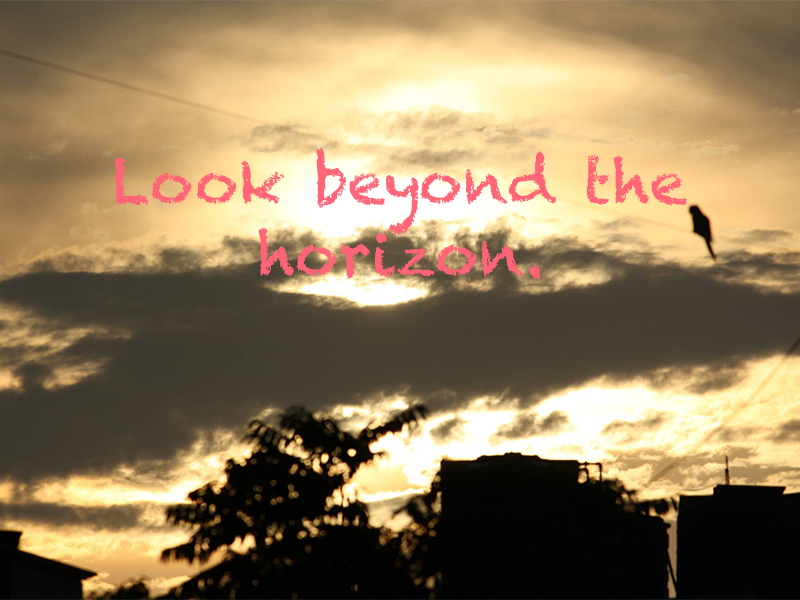
<style>
.page{position:relative;width:800px;height:600px}
.page>*{position:absolute;margin:0}
.t1{font:60px "Chalkduster";color:#ff6477}
</style>
<div class="page">
<p class="t1" style="left:115px;top:147px;width:572px;height:133px;text-align:center">Look beyond the horizon.</p>
</div>
